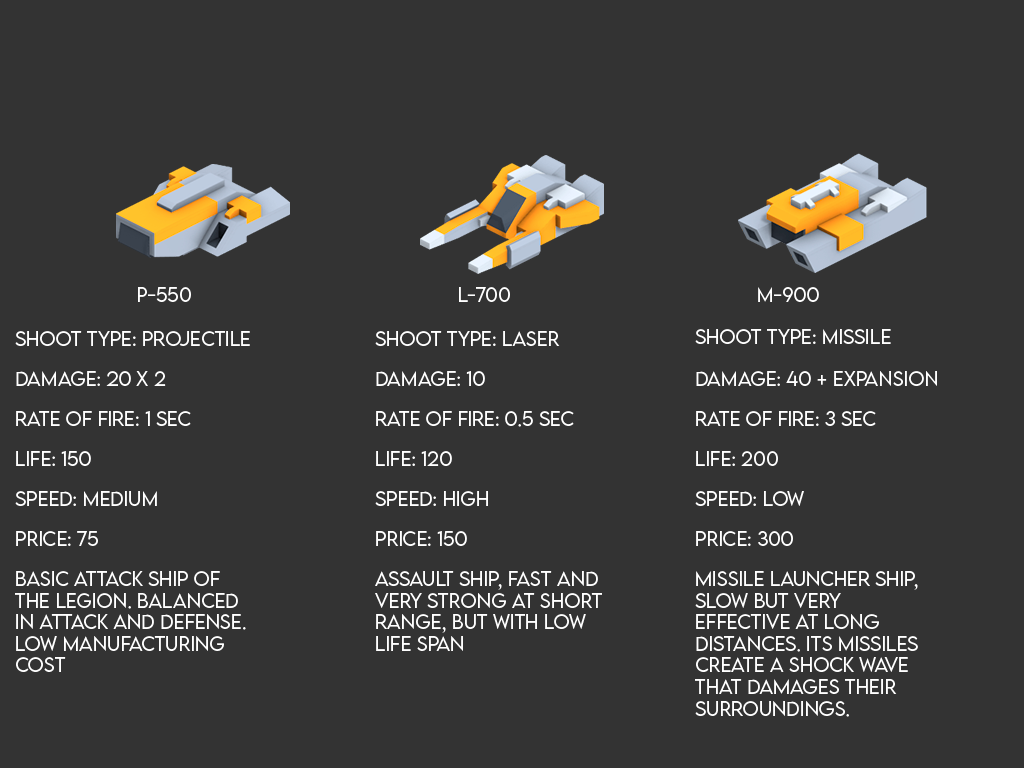
<style>
.page{position:relative;width:1024px;height:768px;background:#333333}
.page>*{position:absolute;margin:0}
.t1{font:18px "LEMONMILK-Light";color:#ffffff}
</style>
<div class="page">
<p class="t1" style="left:695px;top:329px;width:196px;height:15px">shoot type: missile</p>
<p class="t1" style="left:15px;top:331px;width:235px;height:15px">shoot type: projectile</p>
<p class="t1" style="left:375px;top:331px;width:185px;height:15px">shoot type: lASER</p>
<p class="t1" style="left:16px;top:371px;width:150px;height:15px">damage: 20 x 2</p>
<p class="t1" style="left:376px;top:371px;width:109px;height:15px">damage: 10</p>
<p class="t1" style="left:696px;top:371px;width:241px;height:15px">damage: 40 + EXPANSION</p>
<p class="t1" style="left:16px;top:411px;width:175px;height:15px">rate of fire: 1 sec</p>
<p class="t1" style="left:376px;top:411px;width:198px;height:16px">rate of fire: 0.5 sec</p>
<p class="t1" style="left:696px;top:411px;width:180px;height:15px">rate of fire: 3 sec</p>
<p class="t1" style="left:16px;top:451px;width:75px;height:15px">life: 150</p>
<p class="t1" style="left:376px;top:451px;width:76px;height:15px">life: 120</p>
<p class="t1" style="left:696px;top:451px;width:82px;height:15px">life: 200</p>
<p class="t1" style="left:15px;top:491px;width:142px;height:15px">speed: medium</p>
<p class="t1" style="left:375px;top:491px;width:113px;height:15px">speed: HIGH</p>
<p class="t1" style="left:695px;top:491px;width:109px;height:15px">speed: LOW</p>
<p class="t1" style="left:16px;top:531px;width:82px;height:15px">price: 75</p>
<p class="t1" style="left:376px;top:531px;width:91px;height:15px">price: 150</p>
<p class="t1" style="left:696px;top:531px;width:97px;height:15px">price: 300</p>
<p class="t1" style="left:15px;top:571px;width:231px;height:101px">BASIC ATTACK SHIP OF THE LEGION. BALANCED IN ATTACK AND DEFENSE. LOW MANUFACTURING COST</p>
<p class="t1" style="left:375px;top:571px;width:227px;height:80px">ASSAULT SHIP, FAST AND VERY STRONG AT SHORT RANGE, BUT WITH LOW LIFE SPAN</p>
<p class="t1" style="left:695px;top:571px;width:223px;height:146px">MISSILE LAUNCHER SHIP, SLOW BUT VERY EFFECTIVE AT LONG DISTANCES. ITS MISSILES CREATE A SHOCK WAVE THAT DAMAGES THEIR SURROUNDINGS.</p>
</div>
